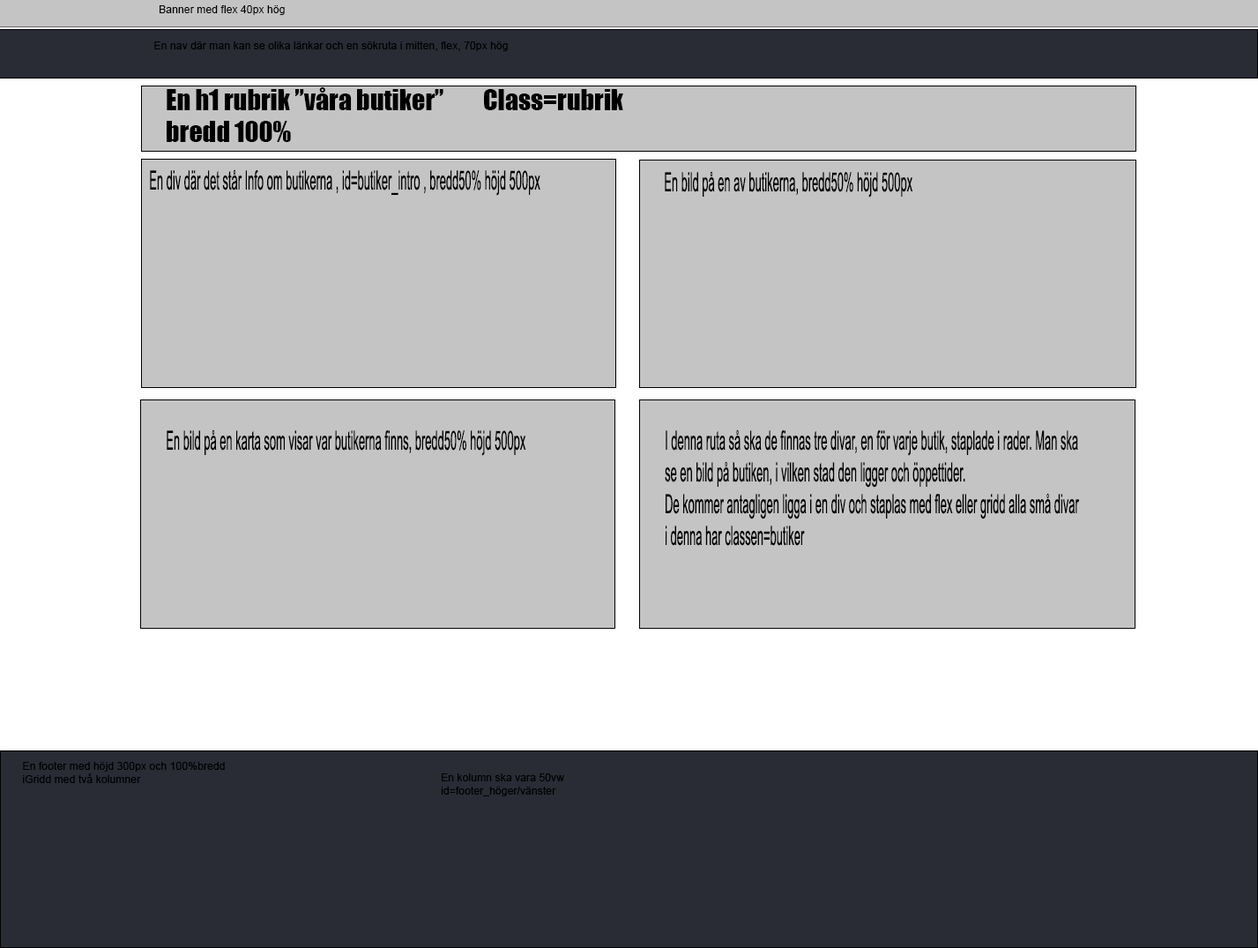
<style>
.page{position:relative;width:1258px;height:948px;background:#c4c4c4}
.page>*{position:absolute;margin:0}
.t1{font:10.8px "ArialMT";color:#000000}
.t2{font:26.4px "Impact";color:#000000}
.t3{font:26.4px "ArialMT";color:#000000;scale:0.43 1}
</style>
<div class="page">
<p class="t1" style="left:160px;top:5px;width:125px;height:10px">Banner med flex 40px hög</p>
<p class="t1" style="left:154px;top:41px;width:354px;height:10px">En nav där man kan se olika länkar och en sökruta i mitten, flex, 70px hög</p>
<p class="t2" style="left:167px;top:87px;width:456px;height:55px">En h1 rubrik ”våra butiker”  Class=rubrik<br>bredd 100%</p>
<p class="t3" style="left:150px;top:169px;width:390px;height:27px">En div där det står Info om butikerna , id=butiker_intro , bredd50% höjd 500px</p>
<p class="t3" style="left:665px;top:171px;width:248px;height:26px">En bild på en av butikerna, bredd50% höjd 500px</p>
<p class="t3" style="left:167px;top:429px;width:359px;height:27px">En bild på en karta som visar var butikerna finns, bredd50% höjd 500px</p>
<p class="t3" style="left:665px;top:429px;width:414px;height:117px">I denna ruta så ska de finnas tre divar, en för varje butik, staplade i rader. Man ska se en bild på butiken, i vilken stad den ligger och öppettider. <br>De kommer antagligen ligga i en div och staplas med flex eller gridd alla små divar i denna har classen=butiker</p>
<p class="t1" style="left:23px;top:762px;width:202px;height:21px">En footer med höjd 300px och 100%bredd<br>iGridd med två kolumner</p>
<p class="t1" style="left:441px;top:773px;width:123px;height:23px">En kolumn ska vara 50vw id=footer_höger/vänster</p>
</div>
